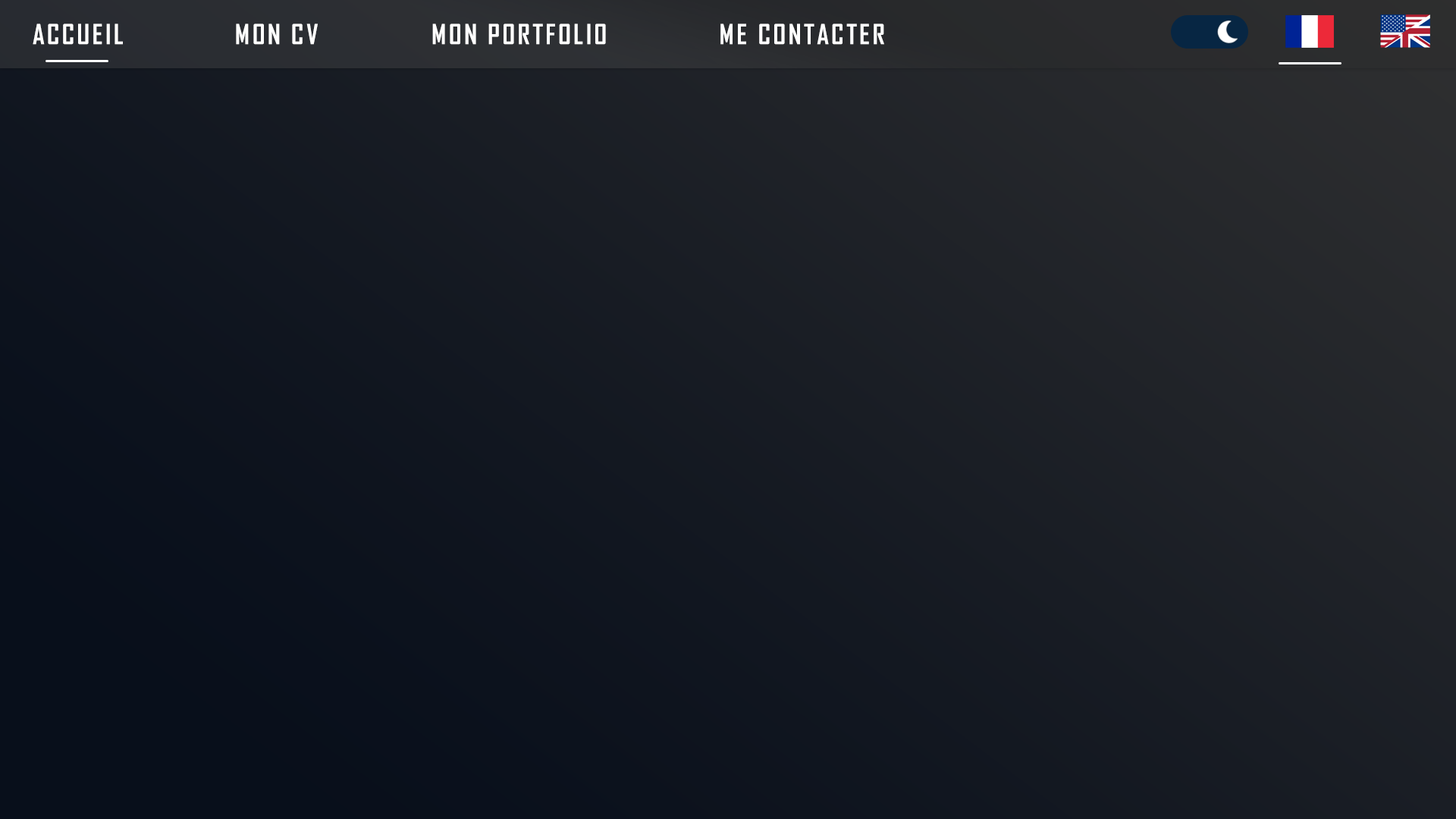
<style>
.page{position:relative;width:1456px;height:819px}
.page>*{position:absolute;margin:0}
.t1{font:26.5px "AgencyFB-Bold";letter-spacing:0.1em;color:#ffffff}
</style>
<div class="page">
<p class="t1" style="left:33px;top:24px;width:90px;height:21px">ACCUEIL</p>
<p class="t1" style="left:236px;top:24px;width:82px;height:21px">MON CV</p>
<p class="t1" style="left:432px;top:24px;width:174px;height:21px">MON PORTFOLIO</p>
<p class="t1" style="left:720px;top:24px;width:164px;height:21px">ME CONTACTER</p>
</div>
